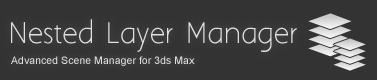
<style>
.page{position:relative;width:377px;height:80px;background:#333333}
.page>*{position:absolute;margin:0}
.t1{font:26px "AaarghNormal";color:#e0e0e0}
.t2{font:10.6px "ArialMT";color:#e0e0e0}
</style>
<div class="page">
<p class="t1" style="left:11px;top:19px;width:286px;height:33px">Nested Layer Manager</p>
<p class="t2" style="left:11px;top:56px;width:184px;height:10px">Advanced Scene Manager for 3ds Max</p>
</div>
